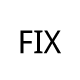
<style>
.page{position:relative;width:80px;height:80px;background:#ffffff}
.page>*{position:absolute;margin:0}
.t1{font:31.8px "DroidSans";color:#000000}
</style>
<div class="page">
<p class="t1" style="left:20px;top:30px;width:41px;height:24px">FIX</p>
</div>
